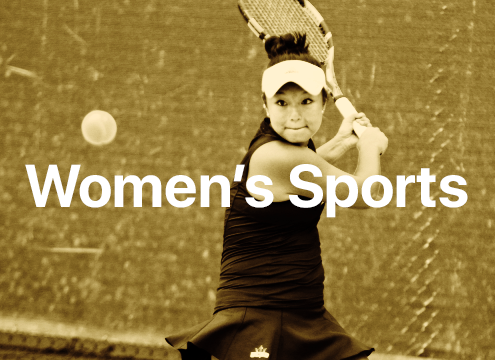
<style>
.page{position:relative;width:495px;height:360px}
.page>*{position:absolute;margin:0}
.t1{font:60px "SFUIDisplay-Bold";color:#ffffff}
</style>
<div class="page">
<p class="t1" style="left:25px;top:164px;width:443px;height:54px">Women’s Sports</p>
</div>
